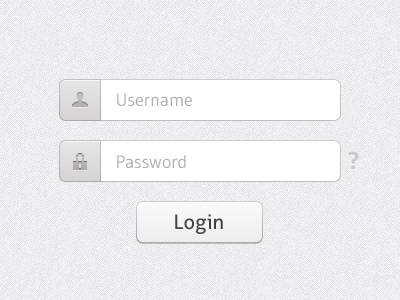
<style>
.page{position:relative;width:400px;height:300px}
.page>*{position:absolute;margin:0}
.t1{font:18px "Gudea";letter-spacing:-0.01em;color:#afaeae}
.t2{font:24px "Aller-Bold";letter-spacing:-0.01em;color:#c9c9c9}
.t3{font:20px "Aller";letter-spacing:0.005em;color:#424242}
</style>
<div class="page">
<p class="t1" style="left:117px;top:93px;width:75px;height:13px">Username</p>
<p class="t1" style="left:117px;top:155px;width:69px;height:14px">Password</p>
<p class="t2" style="left:348px;top:151px;width:11px;height:19px">?</p>
<p class="t3" style="left:175px;top:214px;width:48px;height:20px">Login</p>
</div>
